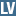
<style>
.page{position:relative;width:16px;height:16px;background:#3c6b8d}
.page>*{position:absolute;margin:0}
.t1{font:16.7px "HelveticaNeue-CondensedBold";color:#ffffff;text-transform:uppercase}
</style>
<div class="page">
<p class="t1" style="left:1px;top:2px;width:7px;height:12px">L</p>
<p class="t1" style="left:6px;top:2px;width:10px;height:12px">V</p>
</div>
